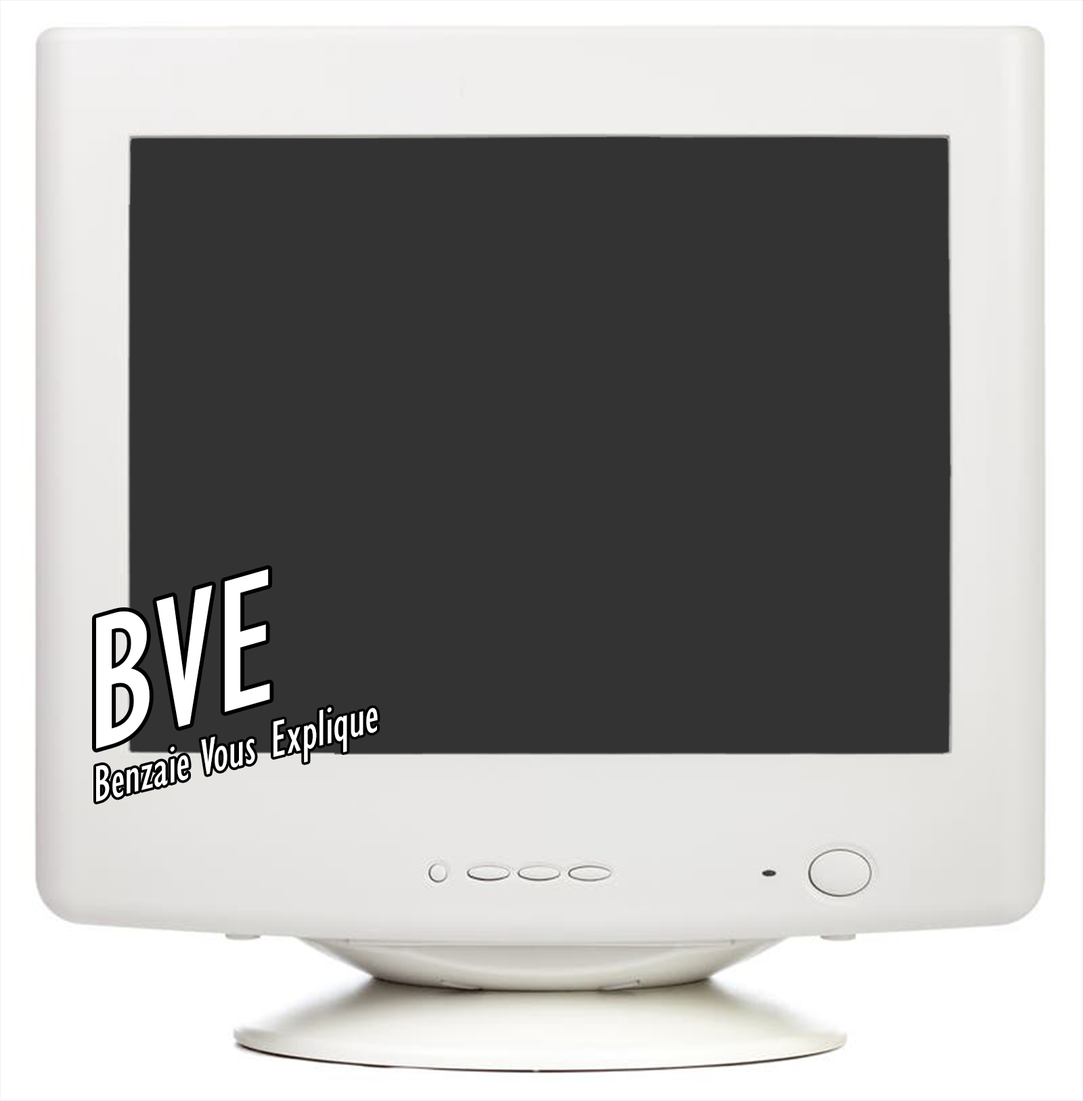
<style>
.page{position:relative;width:1083px;height:1101px;background:#333333}
.page>*{position:absolute;margin:0}
.t1{font:195px "GillSansMT-Condensed";color:#ffffff;scale:0.97 1}
.t2{font:52.7px "GillSansMT-Condensed";color:#ffffff;scale:0.88 1}
</style>
<div class="page">
<p class="t1" style="left:96px;top:569px;width:174px;height:180px;rotate:-16deg">BVE</p>
<p class="t2" style="left:96px;top:707px;width:282px;height:95px;rotate:-14deg">Benzaie Vous Explique</p>
</div>
